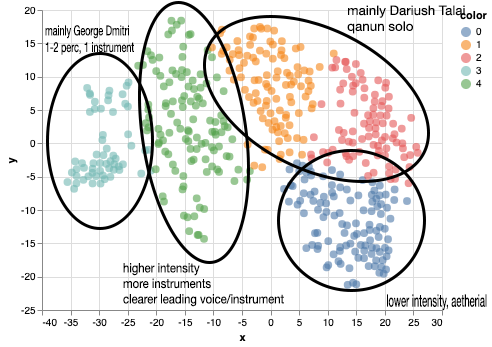
<style>
.page{position:relative;width:492px;height:347px;background:#ffffff}
.page>*{position:absolute;margin:0}
.t1{font:13.2px "HelveticaNeue";color:#000000}
.t2{font:13.9px "HelveticaNeue";color:#000000;scale:0.65 1}
.t3{font:12.9px "HelveticaNeue";color:#000000;scale:0.87 1}
.t4{font:17.1px "HelveticaNeue";color:#000000;scale:0.55 1}
</style>
<div class="page">
<p class="t1" style="left:347px;top:5px;width:118px;height:29px">mainly Dariush Talai<br>qanun solo</p>
<p class="t2" style="left:45px;top:25px;width:89px;height:30px">mainly George Dmitri<br>1-2 perc, 1 instrument</p>
<p class="t3" style="left:123px;top:263px;width:161px;height:44px">higher intensity<br>more instruments<br>clearer leading voice/instrument</p>
<p class="t4" style="left:387px;top:294px;width:100px;height:17px">lower intensity, aetherial</p>
</div>
